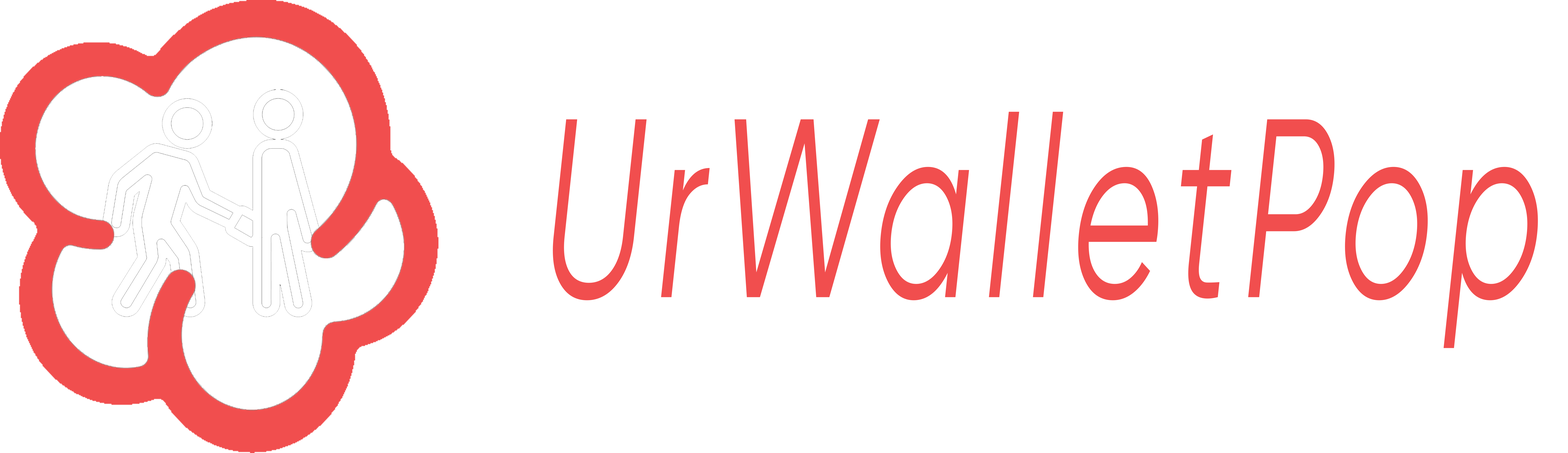
<style>
.page{position:relative;width:1568px;height:453px;background:#ffffff}
.page>*{position:absolute;margin:0}
.t1{font:253.7px "Gilroy-Regular";letter-spacing:0.05em;color:#f14e4e;font-weight:bold;font-style:italic;scale:0.61 1}
</style>
<div class="page">
<p class="t1" style="left:553px;top:112px;width:985px;height:236px">UrWalletPop</p>
</div>
